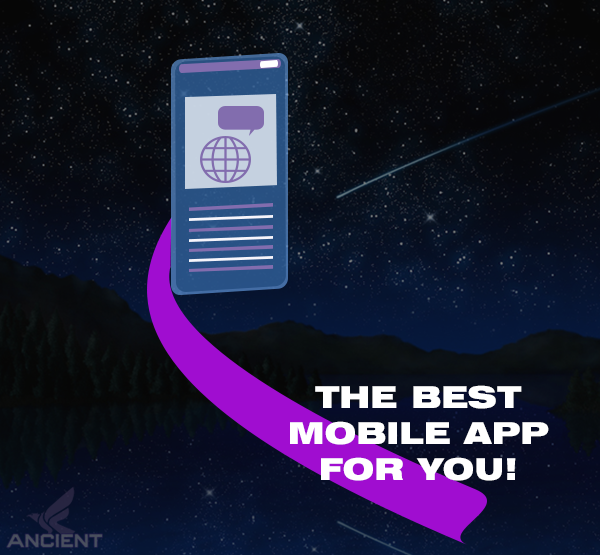
<style>
.page{position:relative;width:600px;height:555px}
.page>*{position:absolute;margin:0}
.t1{font:30px "Swiss721BT-BlackExtended";color:#ffffff}
</style>
<div class="page">
<p class="t1" style="left:290px;top:385px;width:259px;height:96px;text-align:center">THE BEST MOBILE APP FOR YOU!</p>
</div>
